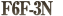
<style>
.page{position:relative;width:63px;height:16px;background:#ffffff}
.page>*{position:absolute;margin:0}
.t1{font:18px "RyuminPro-ExBold";letter-spacing:-0.06em;color:#4a3f32;font-weight:bold;scale:0.9 1}
</style>
<div class="page">
<p class="t1" style="left:1px;top:1px;width:52px;height:15px">F6F-3N</p>
</div>
